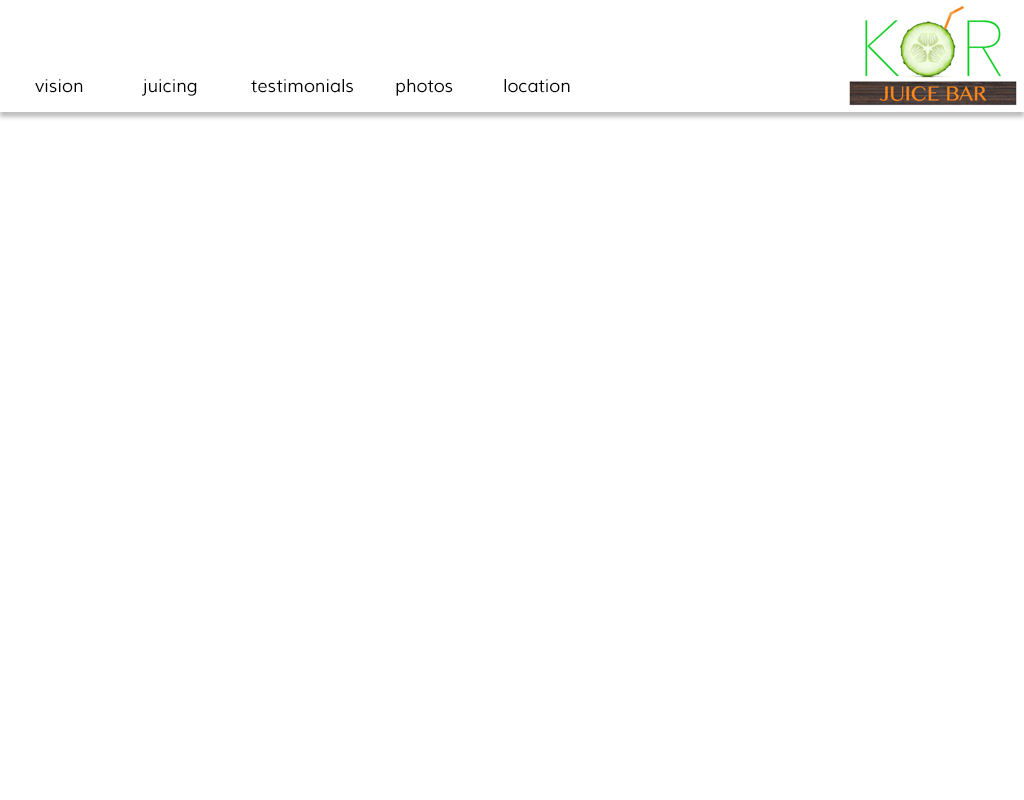
<style>
.page{position:relative;width:1024px;height:800px;background:#ffffff}
.page>*{position:absolute;margin:0}
.t1{font:18px "Muli";color:#000000}
</style>
<div class="page">
<p class="t1" style="left:35px;top:79px;width:535px;height:17px">vision  juicing  testimonials  photos  location</p>
</div>
